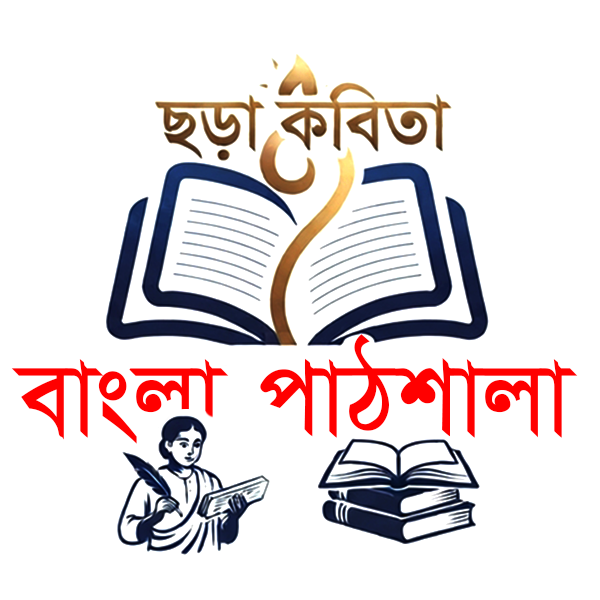
<style>
.page{position:relative;width:600px;height:600px;background:#ffffff}
.page>*{position:absolute;margin:0}
.t1{font:118.1px "SutonnyMJ-Bold";letter-spacing:0.02em;color:#ff0000}
</style>
<div class="page">
<p class="t1" style="left:11px;top:334px;width:567px;height:110px">evsjv cvVkvjv</p>
</div>
